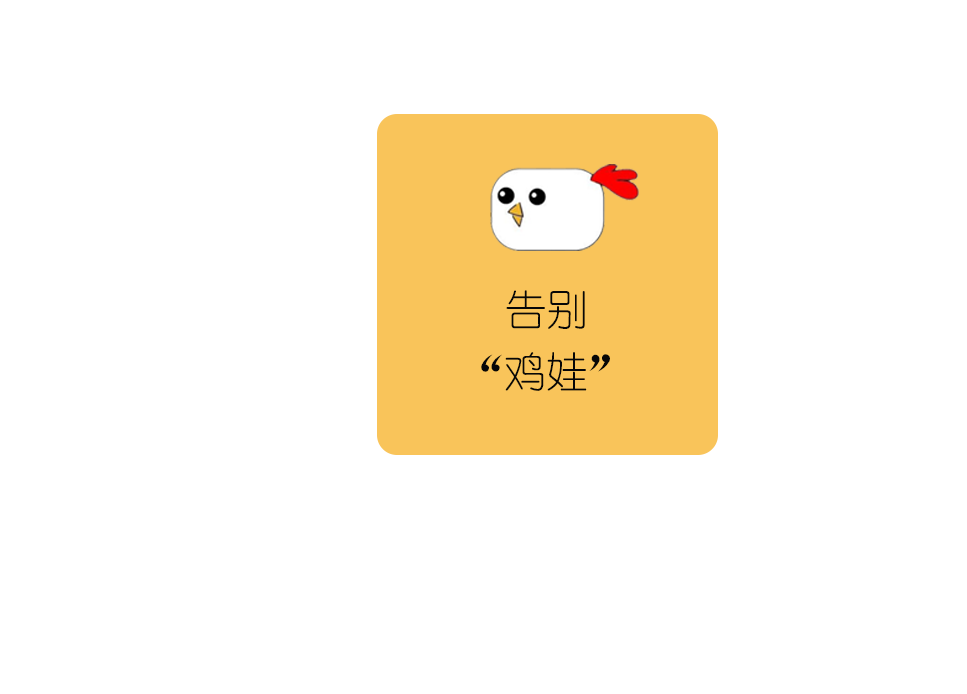
<style>
.page{position:relative;width:967px;height:694px;background:#ffffff}
.page>*{position:absolute;margin:0}
.t1{font:41.8px "YouYuan";color:#070707}
</style>
<div class="page">
<p class="t1" style="left:506px;top:290px;width:79px;height:39px">告别</p>
<p class="t1" style="left:481px;top:352px;width:129px;height:39px">“鸡娃”</p>
</div>
